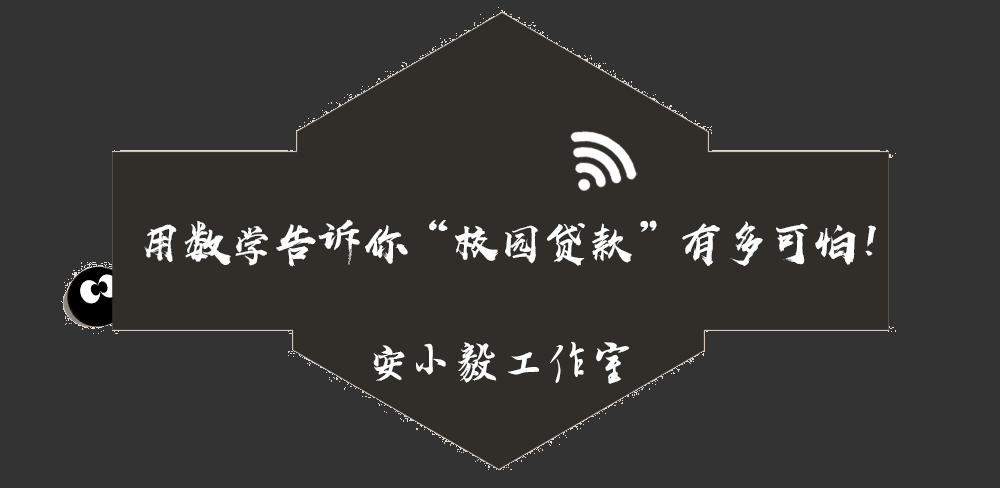
<style>
.page{position:relative;width:1000px;height:488px;background:#333333}
.page>*{position:absolute;margin:0}
.t1{font:45px "HYShangWeiShouShuW-Regular";color:#fcfdfd}
.t2{font:45px "SCFwxz";color:#fcfdfd}
</style>
<div class="page">
<p class="t1" style="left:144px;top:219px;width:732px;height:48px">用数学告诉你“校园贷款”有多可怕！</p>
<p class="t2" style="left:373px;top:342px;width:256px;height:42px">安小毅工作室</p>
</div>
